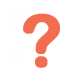
<style>
.page{position:relative;width:80px;height:80px;background:#ffffff}
.page>*{position:absolute;margin:0}
.t1{font:71.7px "ArialRoundedMTBold";color:#f26c4f;font-weight:bold}
</style>
<div class="page">
<p class="t1" style="left:23px;top:13px;width:37px;height:55px">?</p>
</div>
